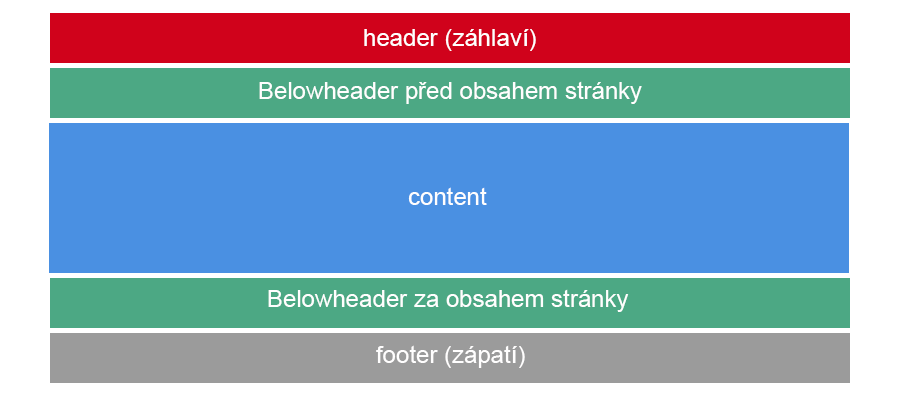
<style>
.page{position:relative;width:900px;height:400px;background:#4a90e2}
.page>*{position:absolute;margin:0}
.t1{font:24px "ArialMT";color:#fffefe}
</style>
<div class="page">
<p class="t1" style="left:364px;top:29px;width:172px;height:22px">header (záhlaví)</p>
<p class="t1" style="left:259px;top:81px;width:383px;height:23px">Belowheader před obsahem stránky</p>
<p class="t1" style="left:408px;top:187px;width:79px;height:18px">content</p>
<p class="t1" style="left:268px;top:289px;width:361px;height:23px">Belowheader za obsahem stránky</p>
<p class="t1" style="left:376px;top:345px;width:149px;height:23px">footer (zápatí)</p>
</div>
